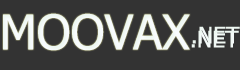
<style>
.page{position:relative;width:240px;height:70px;background:#333333}
.page>*{position:absolute;margin:0}
.t1{font:48px "Tahoma";color:#f9fcfe}
.t2{font:23px "Tahoma";color:#f9fcfe}
</style>
<div class="page">
<p class="t1" style="left:3px;top:13px;width:187px;height:38px">MOOVAX</p>
<p class="t2" style="left:191px;top:30px;width:48px;height:18px">.NET</p>
<p class="t2" style="left:192px;top:26px;width:48px;height:18px">.NET</p>
</div>
